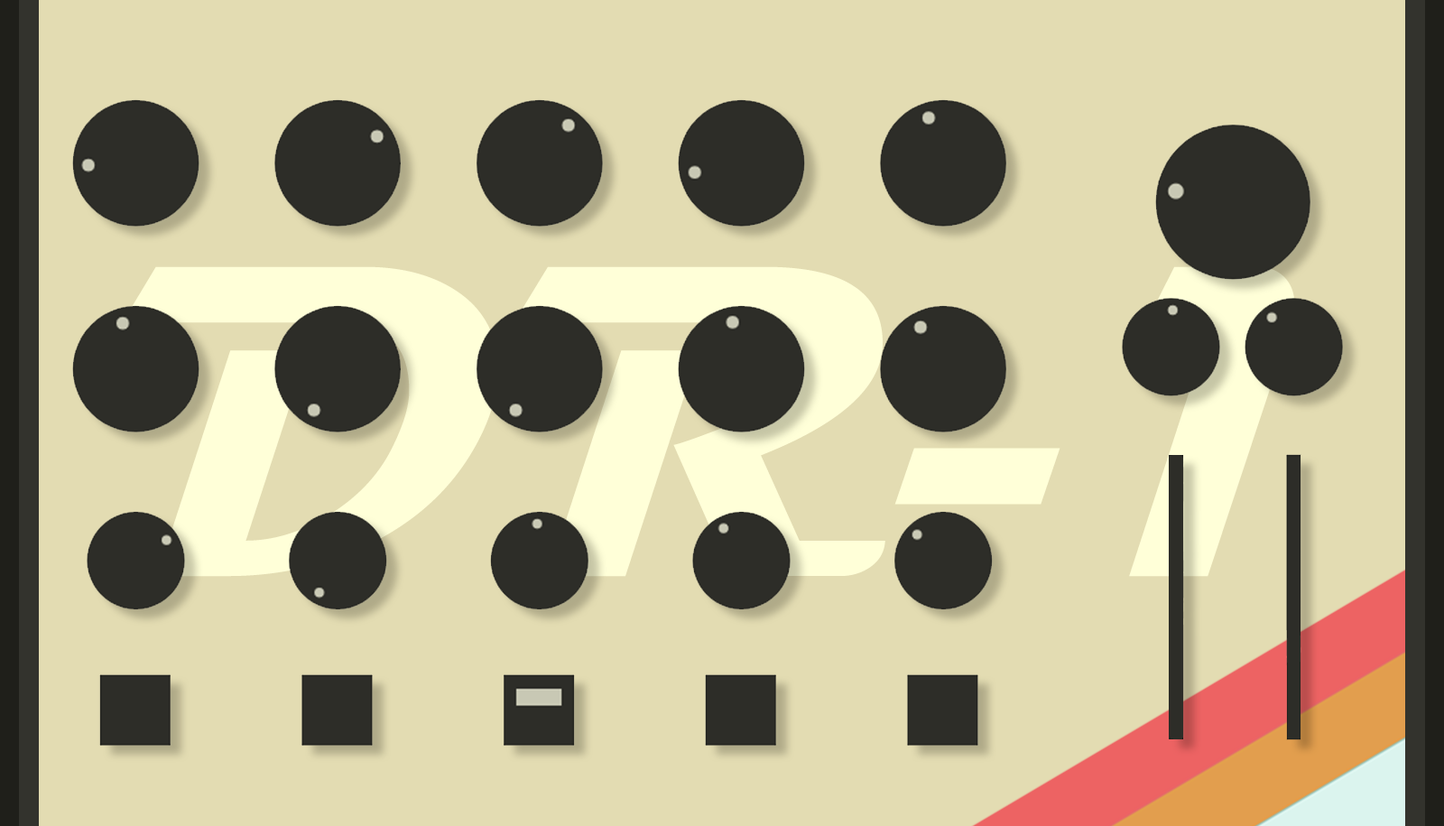
<style>
.page{position:relative;width:1444px;height:826px;background:#e3dcb2}
.page>*{position:absolute;margin:0}
.t1{font:449.4px "Magneto-Bold";color:#ffffd8}
</style>
<div class="page">
<p class="t1" style="left:123px;top:266px;width:1172px;height:311px">DR-1</p>
</div>
